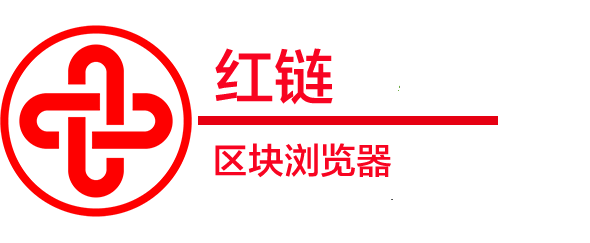
<style>
.page{position:relative;width:590px;height:243px;background:#ffffff}
.page>*{position:absolute;margin:0}
.t1{font:60px "FZLTZHK--GBK1-0";color:#f80421}
.t2{font:36px "FZLTZHK--GBK1-0";color:#f80421}
</style>
<div class="page">
<p class="t1" style="left:215px;top:48px;width:118px;height:57px">红链</p>
<p class="t2" style="left:215px;top:143px;width:176px;height:35px">区块浏览器</p>
</div>
